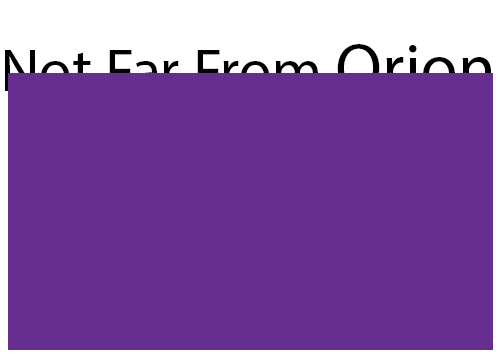
<style>
.page{position:relative;width:504px;height:360px;background:#662d91}
.page>*{position:absolute;margin:0}
.t1{font:60px "MyriadPro-Regular"}
.t2{font:68px "MyriadPro-Regular"}
</style>
<div class="page">
<p class="t1" style="left:5px;top:44px;width:486px;height:48px">Not Far From <span class="t2">Orion</span></p>
</div>
